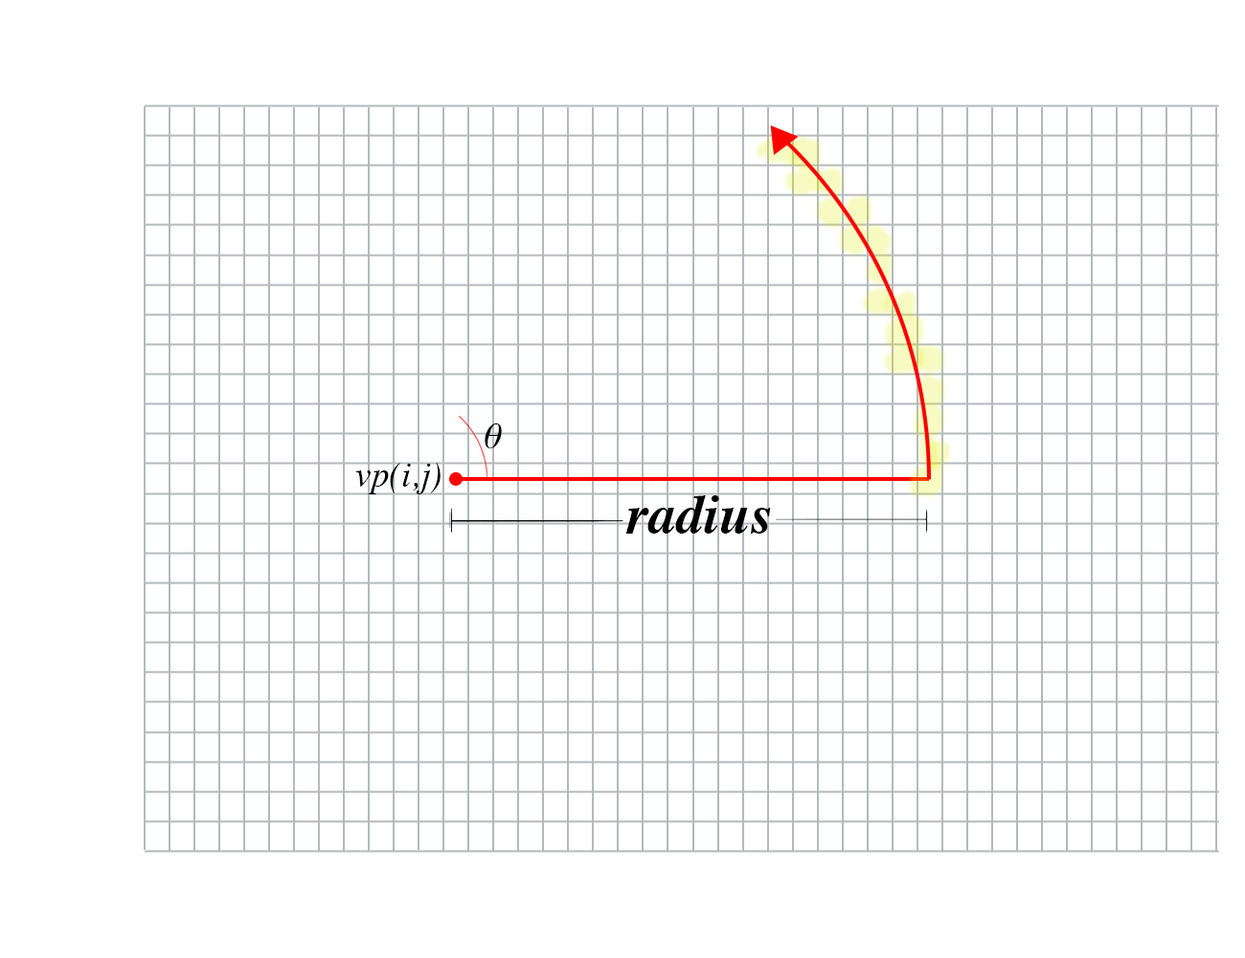
<style>
.page{position:relative;width:1245px;height:958px;background:#ffffff}
.page>*{position:absolute;margin:0}
.t1{font:35.9px "Times-Italic";color:#000000}
.t2{font:55.9px "Times-BoldItalic";color:#000000}
</style>
<div class="page">
<p class="t1" style="left:485px;top:423px;width:17px;height:25px">θ</p>
<p class="t1" style="left:355px;top:463px;width:86px;height:31px">vp(i,j)</p>
<p class="t2" style="left:625px;top:495px;width:146px;height:38px">radius</p>
</div>
